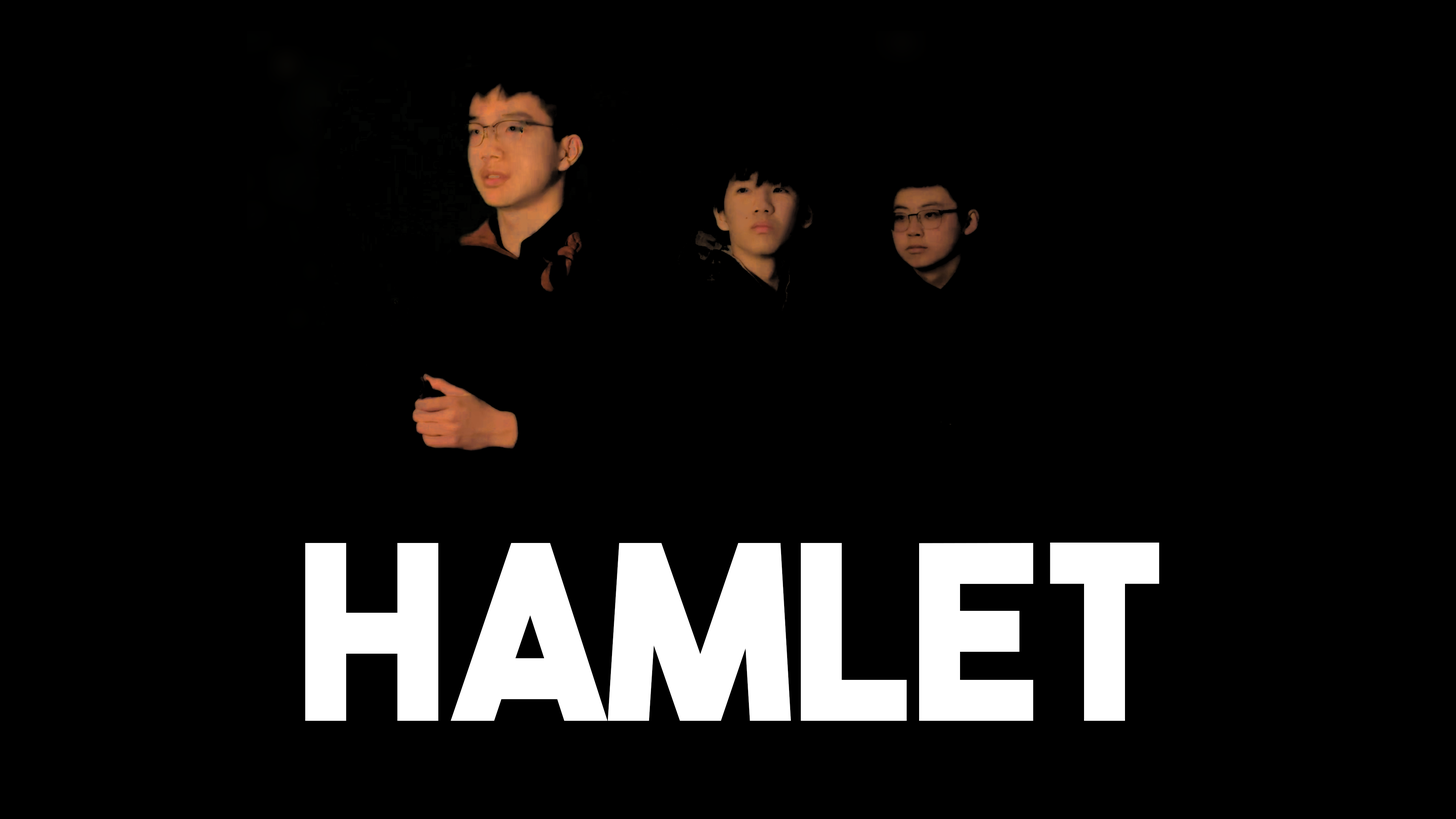
<style>
.page{position:relative;width:1456px;height:819px;background:#000000}
.page>*{position:absolute;margin:0}
.t1{font:242.1px "TheBoldFont-Bold";color:#ffffff}
</style>
<div class="page">
<p class="t1" style="left:305px;top:543px;width:854px;height:178px">Hamlet</p>
</div>
